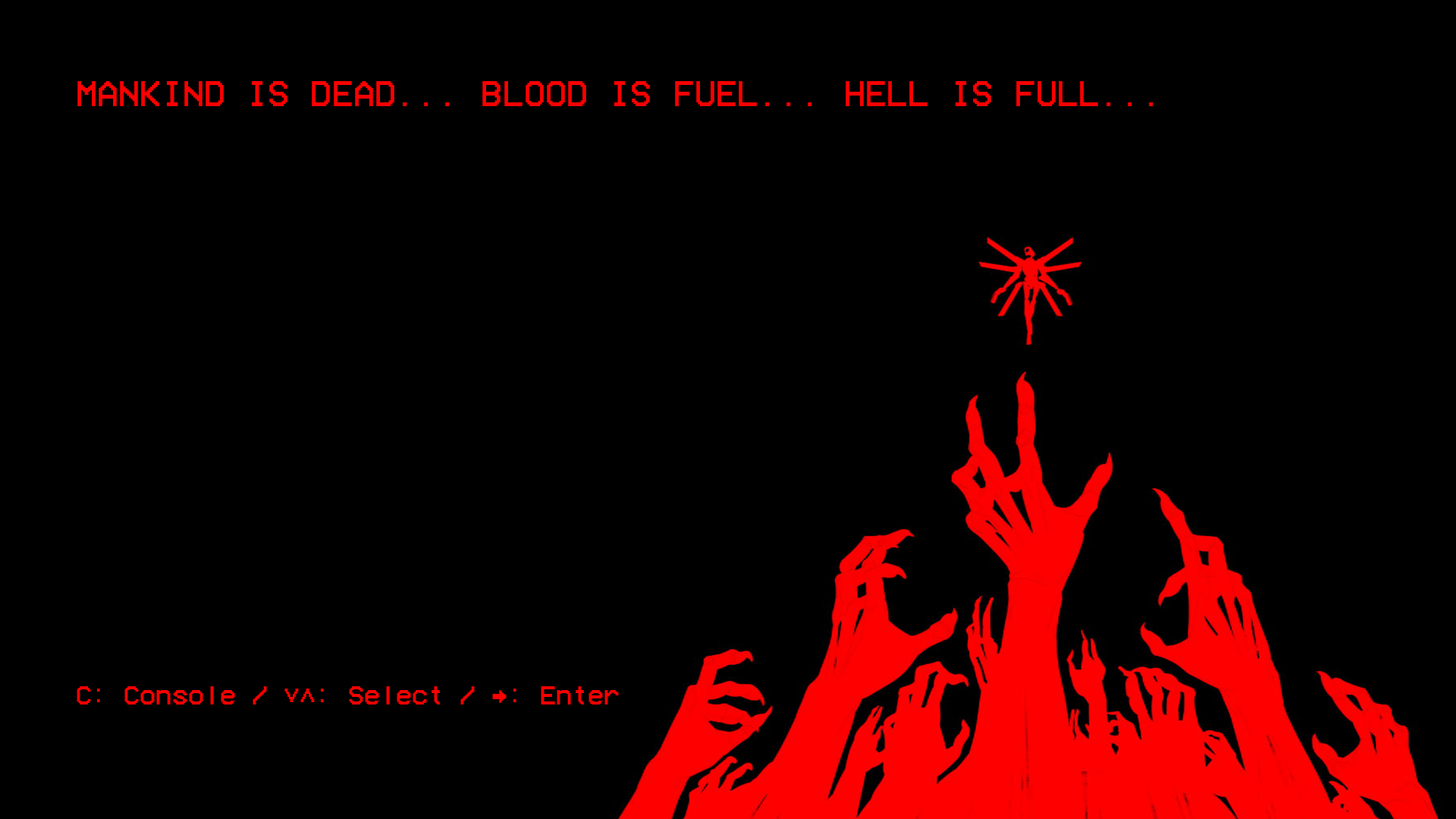
<style>
.page{position:relative;width:1456px;height:819px;background:#000000}
.page>*{position:absolute;margin:0}
.t1{font:36.4px "VCROSDMono";color:#fe0000}
.t2{font:27.3px "VCROSDMono";color:#fe0000}
</style>
<div class="page">
<p class="t1" style="left:77px;top:81px;width:1076px;height:25px">MANKIND IS DEAD... BLOOD IS FUEL... HELL IS FULL...</p>
<p class="t2" style="left:77px;top:686px;width:542px;height:18px">C: Console / ↓↑: Select / ↔: Enter</p>
</div>
